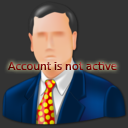
<style>
.page{position:relative;width:128px;height:128px;background:#333333}
.page>*{position:absolute;margin:0}
.t1{font:13px "Calibri"}
</style>
<div class="page">
<p class="t1" style="left:8px;top:62px;width:109px;height:8px">Account is not active</p>
</div>
